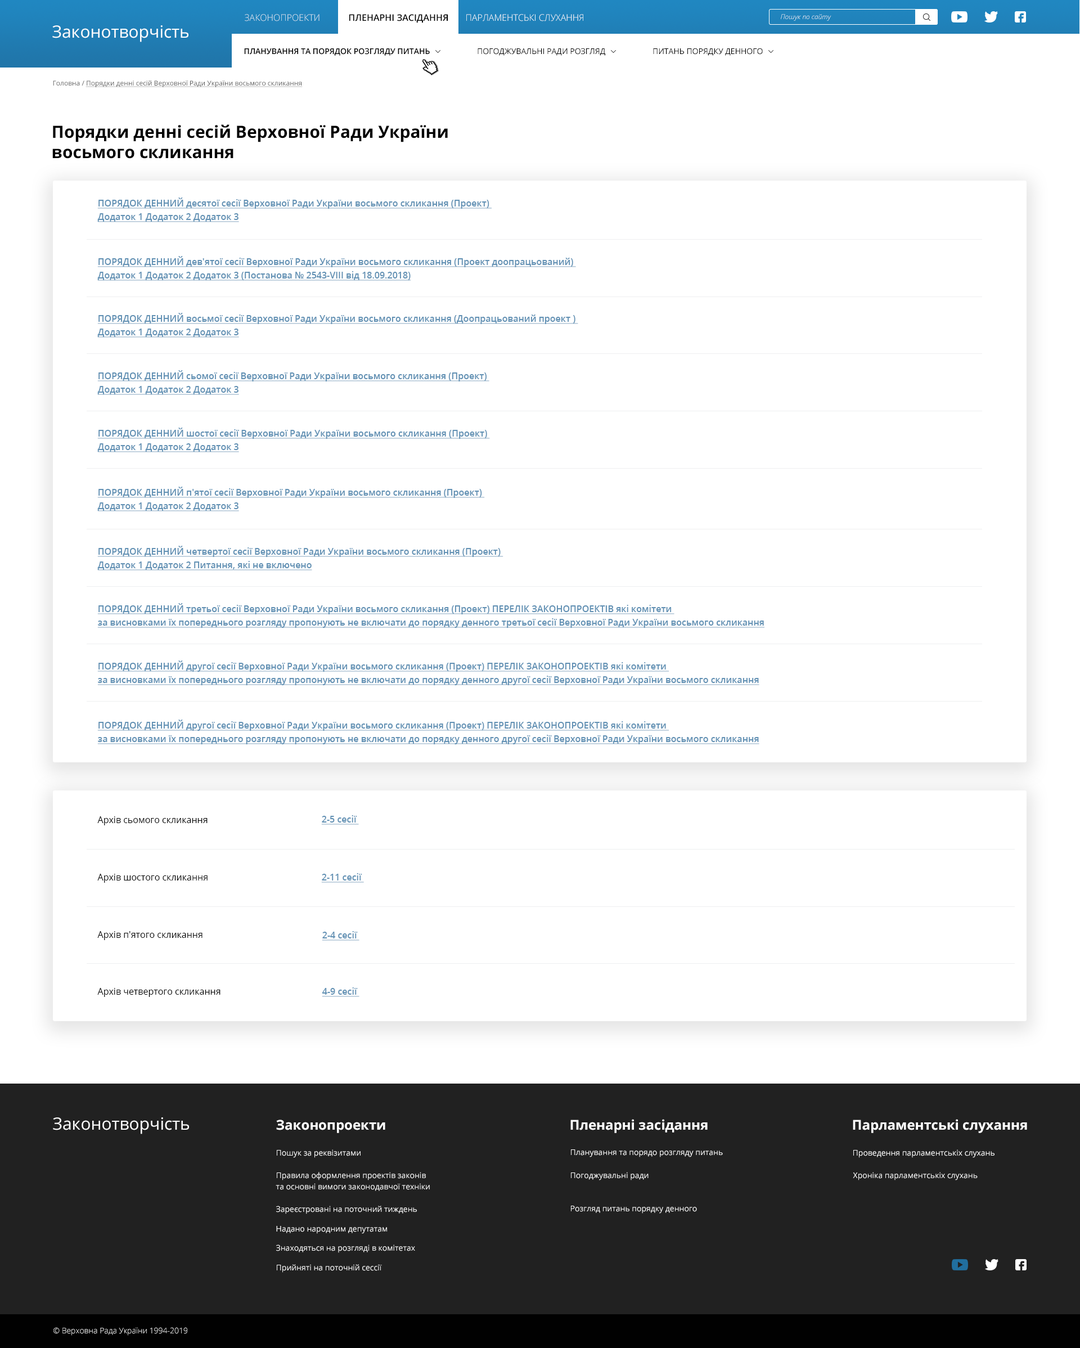
<style>
.page{position:relative;width:1080px;height:1348px;background:#ffffff}
.page>*{position:absolute;margin:0}
.t1{font:9px "OpenSans-Light";color:#dee9f2;text-transform:uppercase}
.t2{font:9px "OpenSans-SemiBold";color:#000000;text-transform:uppercase}
.t3{font:9px "OpenSans-Light";color:#ffffff;text-transform:uppercase}
.t4{font:6.8px "OpenSans-LightItalic";color:#ffffff}
.t5{font:16.9px "OpenSans-Regular";color:#ffffff}
.t6{font:7.9px "OpenSans-Regular";color:#000000}
.t7{font:7.9px "OpenSans-SemiBold";color:#000000}
.t8{font:6.8px "OpenSans-Regular";color:#585858;text-decoration:underline}
.t9{font:6.8px "OpenSans-Regular";color:#585858}
.t10{font:16.9px "OpenSans-Bold";color:#000000}
.t11{font:9px/13.5px "OpenSans-SemiBold";color:#6291b4;text-decoration:underline}
.t12{font:9px "OpenSans-Regular";color:#000000}
.t13{font:9px "OpenSans-SemiBold";color:#6291b4;text-decoration:underline}
.t14{font:13.5px "OpenSans-Bold";color:#ffffff}
.t15{font:7.9px "OpenSans-Regular";color:#ffffff}
.t16{font:7.9px/11.3px "OpenSans-Regular";color:#ffffff}
.t17{font:7.9px/14.6px "OpenSans-Regular";color:#ffffff}
.t18{font:7.9px "OpenSans-Light";color:#ffffff}
</style>
<div class="page">
<p class="t1" style="left:245px;top:14px;width:75px;height:7px">Законопроекти</p>
<p class="t2" style="left:349px;top:14px;width:99px;height:9px">пленарні засідання</p>
<p class="t3" style="left:466px;top:14px;width:117px;height:7px">парламентські слухання</p>
<p class="t4" style="left:781px;top:14px;width:50px;height:7px">Пошук по сайту</p>
<p class="t5" style="left:52px;top:25px;width:136px;height:17px">Законотворчість</p>
<p class="t6" style="left:244px;top:48px;width:519px;height:8px"><span class="t7">ПЛАНУВАННЯ ТА ПОРЯДОК РОЗГЛЯДУ ПИТАНЬ   </span>                    ПОГОДЖУВАЛЬНІ РАДИ РОЗГЛЯД                       ПИТАНЬ ПОРЯДКУ ДЕННОГО</p>
<p class="t8" style="left:53px;top:80px;width:250px;height:7px"><span class="t9">Головна / </span>Порядки денні сесій Верховної Ради України восьмого скликання</p>
<p class="t10" style="left:52px;top:124px;width:396px;height:35px">Порядки денні сесій Верховної Ради України <br>восьмого скликання</p>
<p class="t11" style="left:97px;top:197px;width:395px;height:25px">ПОРЯДОК ДЕННИЙ десятої сесії Верховної Ради України восьмого скликання (Проект) <br>Додаток 1 Додаток 2 Додаток 3</p>
<p class="t11" style="left:97px;top:256px;width:479px;height:25px">ПОРЯДОК ДЕННИЙ дев'ятої сесії Верховної Ради України восьмого скликання (Проект доопрацьований) <br>Додаток 1 Додаток 2 Додаток 3 (Постанова № 2543-VIII від 18.09.2018)</p>
<p class="t11" style="left:97px;top:313px;width:481px;height:25px">ПОРЯДОК ДЕННИЙ восьмої сесії Верховної Ради України восьмого скликання (Доопрацьований проект ) <br>Додаток 1 Додаток 2 Додаток 3</p>
<p class="t11" style="left:97px;top:370px;width:392px;height:25px">ПОРЯДОК ДЕННИЙ сьомої сесії Верховної Ради України восьмого скликання (Проект) <br>Додаток 1 Додаток 2 Додаток 3</p>
<p class="t11" style="left:97px;top:428px;width:393px;height:24px">ПОРЯДОК ДЕННИЙ шостої сесії Верховної Ради України восьмого скликання (Проект) <br>Додаток 1 Додаток 2 Додаток 3</p>
<p class="t11" style="left:97px;top:487px;width:388px;height:24px">ПОРЯДОК ДЕННИЙ п'ятої сесії Верховної Ради України восьмого скликання (Проект) <br>Додаток 1 Додаток 2 Додаток 3</p>
<p class="t11" style="left:97px;top:546px;width:406px;height:24px">ПОРЯДОК ДЕННИЙ четвертої сесії Верховної Ради України восьмого скликання (Проект) <br>Додаток 1 Додаток 2 Питання, які не включено</p>
<p class="t11" style="left:97px;top:603px;width:668px;height:25px">ПОРЯДОК ДЕННИЙ третьої сесії Верховної Ради України восьмого скликання (Проект) ПЕРЕЛІК ЗАКОНОПРОЕКТІВ які комітети <br>за висновками їх попереднього розгляду пропонують не включати до порядку денного третьої сесії Верховної Ради України восьмого скликання</p>
<p class="t11" style="left:97px;top:660px;width:662px;height:25px">ПОРЯДОК ДЕННИЙ другої сесії Верховної Ради України восьмого скликання (Проект) ПЕРЕЛІК ЗАКОНОПРОЕКТІВ які комітети <br>за висновками їх попереднього розгляду пропонують не включати до порядку денного другої сесії Верховної Ради України восьмого скликання</p>
<p class="t11" style="left:97px;top:719px;width:662px;height:25px">ПОРЯДОК ДЕННИЙ другої сесії Верховної Ради України восьмого скликання (Проект) ПЕРЕЛІК ЗАКОНОПРОЕКТІВ які комітети <br>за висновками їх попереднього розгляду пропонують не включати до порядку денного другої сесії Верховної Ради України восьмого скликання</p>
<p class="t12" style="left:97px;top:816px;width:111px;height:9px">Архів сьомого скликання</p>
<p class="t13" style="left:321px;top:815px;width:38px;height:10px">2-5 сесії</p>
<p class="t12" style="left:97px;top:874px;width:111px;height:9px">Архів шостого скликання</p>
<p class="t13" style="left:321px;top:873px;width:43px;height:10px">2-11 сесії</p>
<p class="t12" style="left:97px;top:931px;width:106px;height:9px">Архів п'ятого скликання</p>
<p class="t13" style="left:322px;top:931px;width:37px;height:10px">2-4 сесії</p>
<p class="t12" style="left:97px;top:988px;width:124px;height:9px">Архів четвертого скликання</p>
<p class="t13" style="left:322px;top:987px;width:37px;height:10px">4-9 сесії</p>
<p class="t5" style="left:53px;top:1117px;width:136px;height:17px">Законотворчість</p>
<p class="t14" style="left:276px;top:1119px;width:109px;height:14px">Законопроекти</p>
<p class="t14" style="left:570px;top:1119px;width:138px;height:14px">Пленарні засідання</p>
<p class="t14" style="left:853px;top:1119px;width:174px;height:14px">Парламентські слухання</p>
<p class="t15" style="left:277px;top:1149px;width:84px;height:9px">Пошук за реквізитами</p>
<p class="t15" style="left:571px;top:1149px;width:152px;height:8px">Планування та порядо розгляду питань</p>
<p class="t15" style="left:853px;top:1149px;width:142px;height:9px">Проведення парламентськіх слухань</p>
<p class="t16" style="left:276px;top:1172px;width:154px;height:19px"><span class="t17">Правила оформлення проектів законів<br></span>та основні вимоги законодавчої техніки</p>
<p class="t15" style="left:571px;top:1172px;width:78px;height:8px">Погоджувальні ради</p>
<p class="t15" style="left:853px;top:1172px;width:125px;height:8px">Хроніка парламентськіх слухань</p>
<p class="t15" style="left:276px;top:1205px;width:141px;height:9px">Зареєстровані на поточний тиждень</p>
<p class="t15" style="left:571px;top:1205px;width:126px;height:8px">Розгляд питань порядку денного</p>
<p class="t15" style="left:276px;top:1226px;width:111px;height:8px">Надано народним депутатам</p>
<p class="t15" style="left:276px;top:1244px;width:139px;height:9px">Знаходяться на розгляді в комітетах</p>
<p class="t15" style="left:277px;top:1264px;width:105px;height:8px">Прийняті на поточній сессії</p>
<p class="t18" style="left:53px;top:1327px;width:134px;height:8px">© Верховна Рада України 1994-2019</p>
</div>
